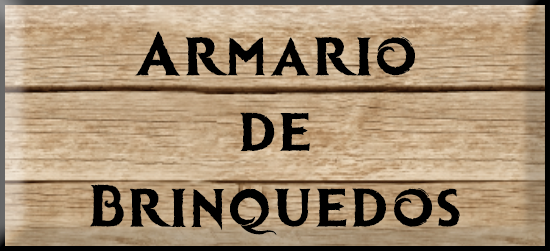
<style>
.page{position:relative;width:550px;height:251px}
.page>*{position:absolute;margin:0}
.t1{font:59.5px/75.7px "Icekingdom-Bold";letter-spacing:0.1em;color:#000000}
</style>
<div class="page">
<p class="t1" style="left:90px;top:31px;width:370px;height:204px;text-align:center">Armario <br>de <br>Brinquedos</p>
</div>
